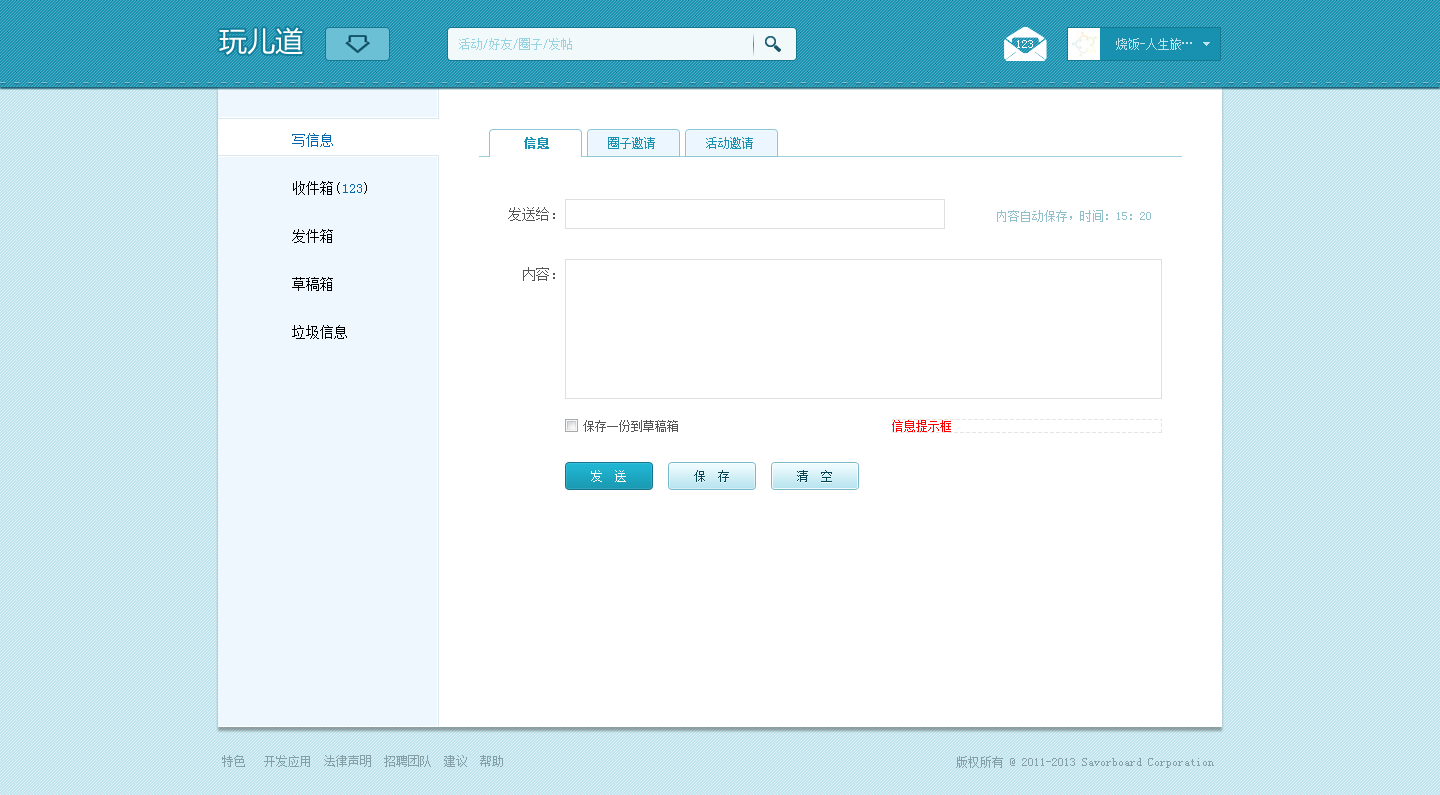
<style>
.page{position:relative;width:1440px;height:795px;background:#ffffff}
.page>*{position:absolute;margin:0}
.t1{font:28px "MicrosoftYaHei";color:#ffffff}
.t2{font:12px "SimSun";color:#98d3e4}
.t3{font:12px "SimSun";color:#ffffff}
.t4{font:14px/48px "SimSun";letter-spacing:0.01em;color:#000000}
.t5{font:14px/48px "SimSun";letter-spacing:0.01em;color:#0666ae}
.t6{font:12px "SimSun";color:#1992b1;font-weight:bold}
.t7{font:12px "SimSun";color:#1992b1}
.t8{font:14px/60px "SimSun";color:#555555}
.t9{font:12px "SimSun";color:#8fc0cc}
.t10{font:12px "SimSun";color:#555555}
.t11{font:12px "SimSun";color:#044455}
.t12{font:12px "SimSun";color:#849fa6}
</style>
<div class="page">
<p class="t1" style="left:219px;top:27px;width:84px;height:28px">玩儿道</p>
<p class="t2" style="left:459px;top:38px;width:113px;height:12px">活动/好友/圈子/发帖</p>
<p class="t3" style="left:1017px;top:40px;width:16px;height:8px">123</p>
<p class="t4" style="left:292px;top:133px;width:75px;height:206px"><span class="t5">写信息<br></span>收件箱(<span class="t5">123</span>)<br>发件箱<br>草稿箱<br>垃圾信息</p>
<p class="t6" style="left:524px;top:137px;width:25px;height:12px">信息</p>
<p class="t7" style="left:608px;top:137px;width:47px;height:12px">圈子邀请</p>
<p class="t7" style="left:706px;top:137px;width:47px;height:12px">活动邀请</p>
<p class="t8" style="left:508px;top:207px;width:47px;height:74px;text-align:right">发送给：<br>内容：</p>
<p class="t9" style="left:997px;top:210px;width:154px;height:12px">内容自动保存，时间：15：20</p>
<p class="t10" style="left:583px;top:420px;width:95px;height:12px">保存一份到草稿箱</p>
<p class="t3" style="left:591px;top:470px;width:35px;height:12px">发  送</p>
<p class="t11" style="left:694px;top:470px;width:35px;height:12px">保  存</p>
<p class="t11" style="left:797px;top:470px;width:35px;height:12px">清  空</p>
<p class="t12" style="left:222px;top:755px;width:281px;height:12px">特色   开发应用  法律声明  招聘团队  建议  帮助</p>
<p class="t12" style="left:956px;top:756px;width:258px;height:12px">版权所有 @ 2011-2013 Savorboard Corporation</p>
</div>
